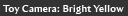
<style>
.page{position:relative;width:128px;height:16px;background:#333333}
.page>*{position:absolute;margin:0}
.t1{font:9.6px "AmiraParadiso";letter-spacing:0.05em;color:#ffffff}
</style>
<div class="page">
<p class="t1" style="left:3px;top:5px;width:121px;height:9px">Toy Camera: Bright Yellow</p>
</div>
